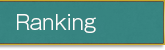
<style>
.page{position:relative;width:165px;height:50px;background:#378481}
.page>*{position:absolute;margin:0}
.t1{font:20px "GothicMB101Pro-Light";color:#fbfbf9}
</style>
<div class="page">
<p class="t1" style="left:17px;top:14px;width:79px;height:19px">Ranking</p>
</div>
